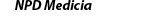
<style>
.page{position:relative;width:150px;height:19px;background:#ffffff}
.page>*{position:absolute;margin:0}
.t1{font:14px "MyriadPro-BoldIt";color:#000000}
</style>
<div class="page">
<p class="t1" style="left:15px;top:0px;width:77px;height:10px">NPD Medicia</p>
</div>
